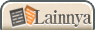
<style>
.page{position:relative;width:95px;height:30px}
.page>*{position:absolute;margin:0}
.t1{font:19px "RyuminPro-ExBold";letter-spacing:-0.08em;color:#716d66;scale:0.9 1}
</style>
<div class="page">
<p class="t1" style="left:33px;top:10px;width:59px;height:17px">Lainnya</p>
</div>
